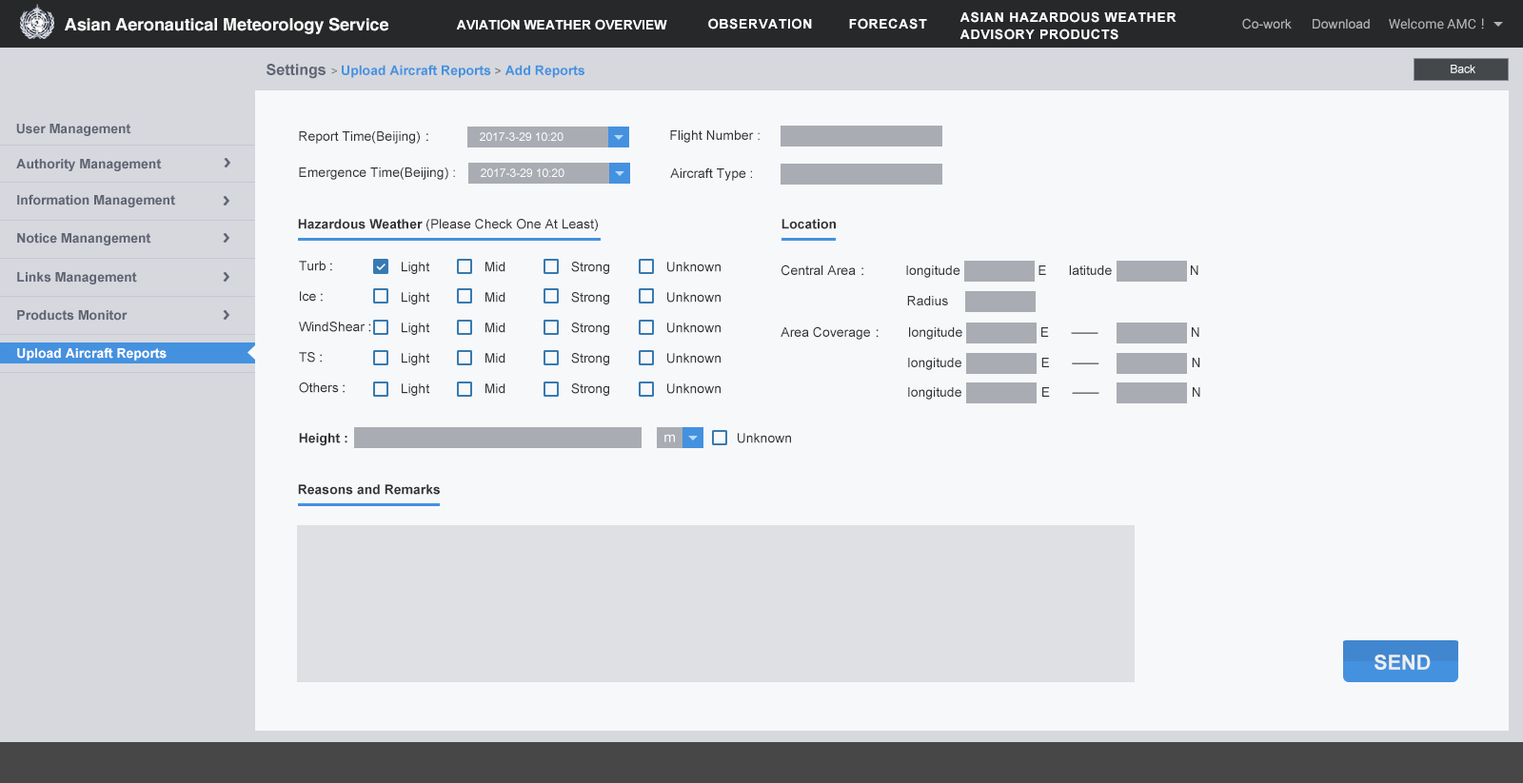
<style>
.page{position:relative;width:1523px;height:783px;background:#f7f8fa}
.page>*{position:absolute;margin:0}
.t1{font:17.1px "Helvetica-Bold";letter-spacing:-0.005em;color:#fafafa}
.t2{font:13.3px/17.1px "Arial-BoldMT";letter-spacing:0.05em;color:#ffffff}
.t3{font:13.3px "Arial-BoldMT";color:#ffffff}
.t4{font:13.3px "Arial-BoldMT";letter-spacing:0.05em;color:#ffffff}
.t5{font:13.3px "ArialMT";color:#b3b3b3}
.t6{font:13.3px "Roboto-Regular";color:#b3b3b3}
.t7{font:13.3px "MicrosoftYaHei";color:#b3b3b3}
.t8{font:13.3px "Arial-BoldMT";color:#4491e0}
.t9{font:15.2px "Arial-BoldMT";color:#606573}
.t10{font:11.4px "ArialMT";color:#606573}
.t11{font:11.4px "Arial-BoldMT";color:#808080}
.t12{font:11.4px "ArialMT";color:#ffffff}
.t13{font:13.3px "Arial-BoldMT";color:#606573}
.t14{font:13.3px "ArialMT";color:#333333}
.t15{font:13.3px "MicrosoftYaHei";color:#333333}
.t16{font:13.3px "Arial-BoldMT";color:#333333}
.t17{font:13.3px/30.5px "ArialMT";color:#333333}
.t18{font:13.3px/30.5px "MicrosoftYaHei";color:#333333}
.t19{font:13.3px "MicrosoftYaHei";letter-spacing:-0.1em;color:#333333}
.t20{font:13.3px "MicrosoftYaHei";color:#ffffff}
.t21{font:20.5px "Arial-BoldMT";color:#eeeeee}
</style>
<div class="page">
<p class="t1" style="left:65px;top:17px;width:323px;height:17px">Asian Aeronautical Meteorology Service</p>
<p class="t2" style="left:959px;top:11px;width:217px;height:29px">ASIAN HAZARDOUS WEATHER<br>ADVISORY PRODUCTS</p>
<p class="t3" style="left:456px;top:19px;width:211px;height:11px">AVIATION WEATHER OVERVIEW</p>
<p class="t4" style="left:708px;top:18px;width:104px;height:11px">OBSERVATION</p>
<p class="t4" style="left:849px;top:18px;width:78px;height:11px">FORECAST</p>
<p class="t5" style="left:1242px;top:18px;width:49px;height:11px">Co-work</p>
<p class="t5" style="left:1312px;top:19px;width:57px;height:10px">Download</p>
<p class="t6" style="left:1388px;top:18px;width:96px;height:11px">Welcome AMC<span class="t7">！</span></p>
<p class="t8" style="left:266px;top:64px;width:318px;height:15px"><span class="t9">Settings </span><span class="t10">&gt; </span>Upload Aircraft Reports <span class="t11">&gt;</span> Add Reports</p>
<p class="t12" style="left:1450px;top:65px;width:25px;height:8px">Back</p>
<p class="t13" style="left:16px;top:124px;width:115px;height:12px">User Management</p>
<p class="t14" style="left:299px;top:131px;width:129px;height:13px">Report Time(Beijing)<span class="t15">：</span></p>
<p class="t12" style="left:480px;top:132px;width:83px;height:9px">2017-3-29 10:20</p>
<p class="t14" style="left:670px;top:130px;width:89px;height:13px">Flight Number :</p>
<p class="t13" style="left:16px;top:159px;width:146px;height:12px">Authority Management</p>
<p class="t14" style="left:299px;top:167px;width:156px;height:13px">Emergence Time(Beijing) :</p>
<p class="t12" style="left:481px;top:168px;width:83px;height:9px">2017-3-29 10:20</p>
<p class="t14" style="left:670px;top:168px;width:82px;height:13px">Aircraft Type :</p>
<p class="t13" style="left:17px;top:194px;width:158px;height:13px">Information Management</p>
<p class="t14" style="left:298px;top:219px;width:300px;height:12px"><span class="t16">Hazardous Weather </span>(Please Check One At Least)</p>
<p class="t16" style="left:781px;top:219px;width:55px;height:10px">Location</p>
<p class="t13" style="left:17px;top:233px;width:134px;height:13px">Notice Manangement</p>
<p class="t17" style="left:299px;top:261px;width:72px;height:132px">Turb <span class="t18">:<br></span>Ice <span class="t18">:<br></span>WindShear <span class="t18">:<br></span>TS <span class="t18">:<br></span>Others <span class="t18">:</span></p>
<p class="t17" style="left:402px;top:262px;width:28px;height:134px">Light<br>Light<br>Light<br>Light<br>Light</p>
<p class="t17" style="left:485px;top:262px;width:20px;height:132px">Mid<br>Mid<br>Mid<br>Mid<br>Mid</p>
<p class="t17" style="left:571px;top:262px;width:38px;height:134px">Strong<br>Strong<br>Strong<br>Strong<br>Strong</p>
<p class="t17" style="left:667px;top:262px;width:53px;height:132px">Unknown<br>Unknown<br>Unknown<br>Unknown<br>Unknown</p>
<p class="t17" style="left:781px;top:265px;width:417px;height:40px">Central Area<span class="t18">：</span>          longitude                     E      latitude                     N    <br>                                  Radius</p>
<p class="t13" style="left:17px;top:272px;width:120px;height:13px">Links Management</p>
<p class="t13" style="left:17px;top:310px;width:111px;height:11px">Products Monitor</p>
<p class="t14" style="left:780px;top:326px;width:419px;height:14px">Area Coverage<span class="t19">：</span>       longitude                     E      ——                         N</p>
<p class="t3" style="left:17px;top:347px;width:150px;height:14px">Upload Aircraft Reports</p>
<p class="t14" style="left:908px;top:358px;width:292px;height:12px">longitude                     E      ——                         N</p>
<p class="t14" style="left:908px;top:387px;width:292px;height:13px">longitude                     E      ——                         N</p>
<p class="t16" style="left:299px;top:433px;width:48px;height:13px">Height :</p>
<p class="t20" style="left:664px;top:434px;width:11px;height:8px">m</p>
<p class="t14" style="left:737px;top:433px;width:54px;height:10px">Unknown</p>
<p class="t16" style="left:298px;top:484px;width:142px;height:11px">Reasons and Remarks</p>
<p class="t21" style="left:1374px;top:655px;width:56px;height:15px">SEND</p>
</div>
